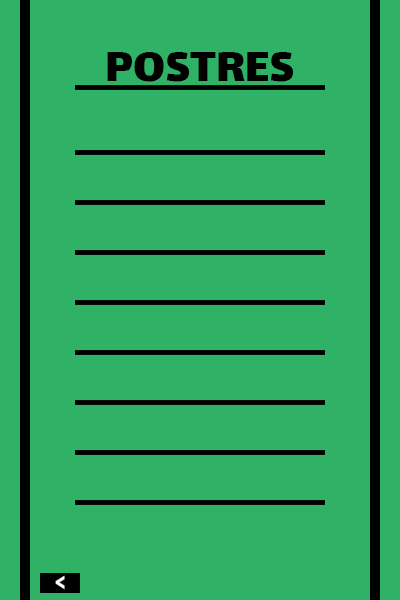
<style>
.page{position:relative;width:400px;height:600px;background:#2fb166}
.page>*{position:absolute;margin:0}
.t1{font:50px "Lalezar-Regular";color:#000000}
</style>
<div class="page">
<p class="t1" style="left:107px;top:52px;width:187px;height:30px">POSTRES</p>
</div>
